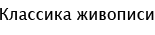
<style>
.page{position:relative;width:155px;height:35px;background:#ffffff}
.page>*{position:absolute;margin:0}
.t1{font:16px "LucidaGrande";color:#000000}
</style>
<div class="page">
<p class="t1" style="left:0px;top:8px;width:154px;height:12px">Классика живописи</p>
</div>
